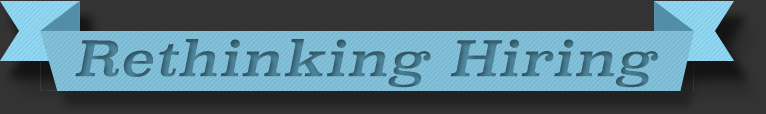
<style>
.page{position:relative;width:766px;height:114px;background:#333333}
.page>*{position:absolute;margin:0}
.t1{font:48px "Superclarendon-Italic";letter-spacing:0.015em;color:#427184;scale:1.1 1}
</style>
<div class="page">
<p class="t1" style="left:75px;top:39px;width:583px;height:49px">Rethinking Hiring</p>
</div>
